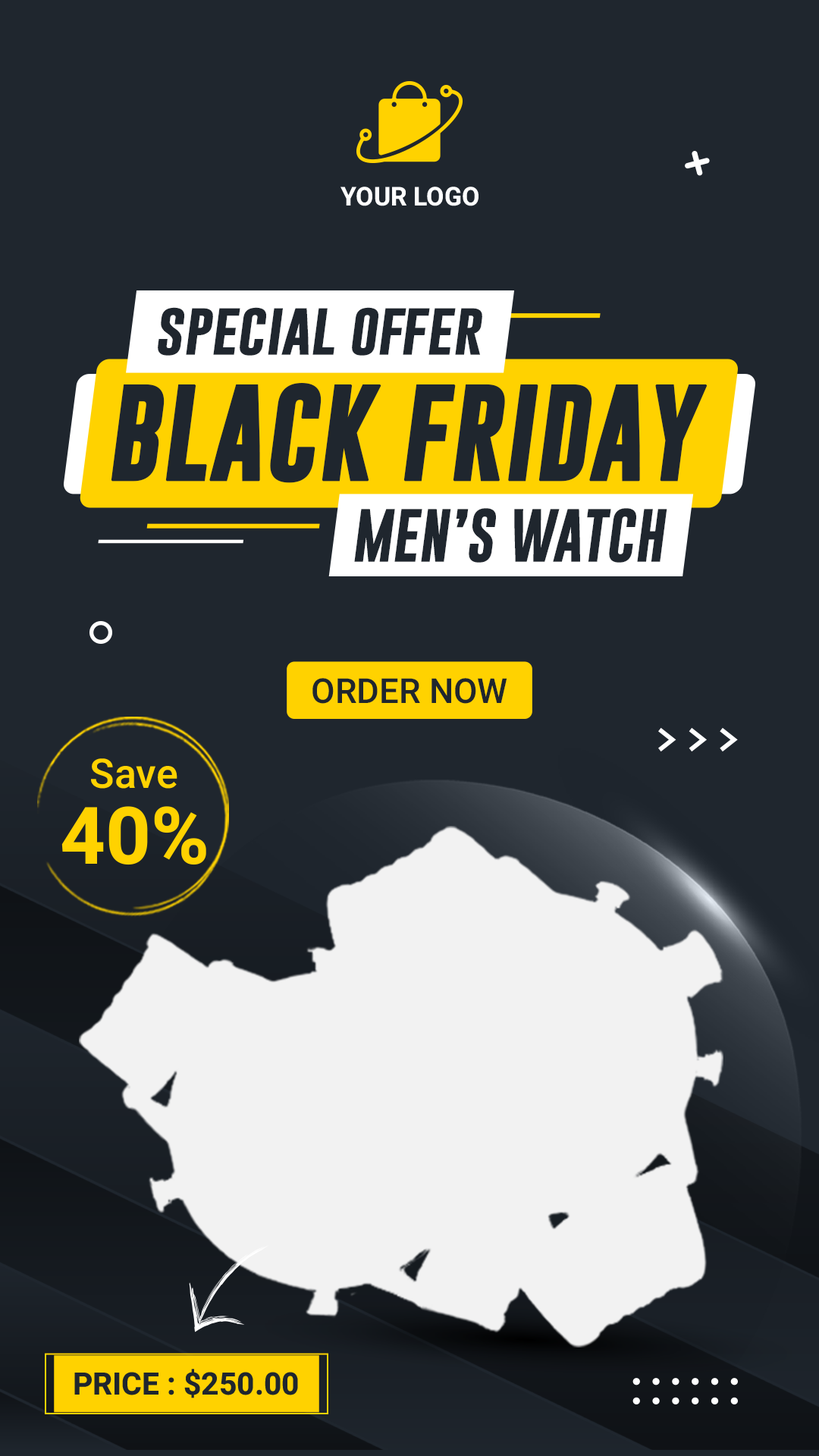
<style>
.page{position:relative;width:819px;height:1456px;background:#1f262e}
.page>*{position:absolute;margin:0}
.t1{font:26px "Heebo-Bold";color:#ffffff}
.t2{font:54.4px "GoboldBold";color:#1f262e}
.t3{font:98px "GoboldBold";color:#1f262e;font-weight:bold}
.t4{font:34.4px "Heebo-Medium";color:#1f262e}
.t5{font:40.9px "Heebo-Medium";color:#ffd200}
.t6{font:79.5px "Heebo-Bold";color:#ffd200}
.t7{font:31px "Heebo-Bold";color:#1f262e}
</style>
<div class="page">
<p class="t1" style="left:340px;top:187px;width:139px;height:19px">YOUR LOGO</p>
<p class="t2" style="left:158px;top:307px;width:324px;height:49px">special offer</p>
<p class="t3" style="left:111px;top:383px;width:597px;height:100px">BLACK FRIDAY</p>
<p class="t2" style="left:354px;top:508px;width:313px;height:55px">MEN’S WATCH</p>
<p class="t4" style="left:312px;top:678px;width:195px;height:26px">ORDER NOW</p>
<p class="t5" style="left:91px;top:758px;width:86px;height:31px">Save</p>
<p class="t6" style="left:61px;top:806px;width:145px;height:59px">40%</p>
<p class="t7" style="left:74px;top:1369px;width:224px;height:29px">PRICE : $250.00</p>
</div>
